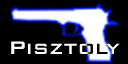
<style>
.page{position:relative;width:128px;height:64px;background:#000000}
.page>*{position:absolute;margin:0}
.t1{font:24px "BankGothicBT-Medium";color:#ffffff}
</style>
<div class="page">
<p class="t1" style="left:11px;top:41px;width:109px;height:13px">Pisztoly</p>
</div>
